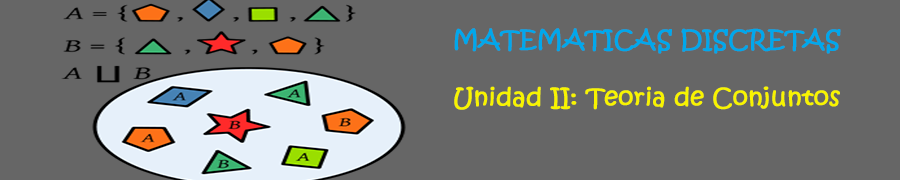
<style>
.page{position:relative;width:900px;height:180px;background:#666666}
.page>*{position:absolute;margin:0}
.t1{font:24px "KristenITC-Regular";color:#f8f400;font-weight:bold}
.t2{font:24px "KristenITC-Regular";color:#00a8ec;font-weight:bold}
</style>
<div class="page">
<p class="t1" style="left:454px;top:28px;width:387px;height:82px;text-align:center"><span class="t2">MATEMATICAS DISCRETAS<br><br></span>Unidad II: Teoria de Conjuntos</p>
</div>
